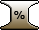
<style>
.page{position:relative;width:39px;height:30px;background:#ffffff}
.page>*{position:absolute;margin:0}
.t1{font:11px "Verdana";color:#000000}
</style>
<div class="page">
<p class="t1" style="left:14px;top:11px;width:11px;height:8px">%</p>
</div>
